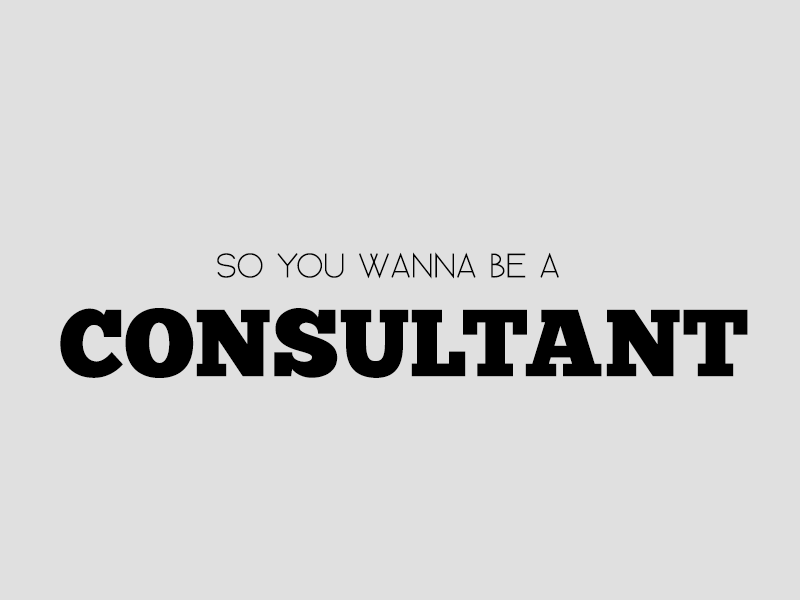
<style>
.page{position:relative;width:800px;height:600px;background:#e0e0e0}
.page>*{position:absolute;margin:0}
.t1{font:44px "Existence-UnicaseLight";letter-spacing:-0.04em;color:#000000}
.t2{font:95px "ChunkFive-Roman";color:#000000}
</style>
<div class="page">
<p class="t1" style="left:217px;top:252px;width:342px;height:27px">So You WANNA BE A</p>
<p class="t2" style="left:60px;top:308px;width:688px;height:70px">CONSULTANT</p>
</div>
